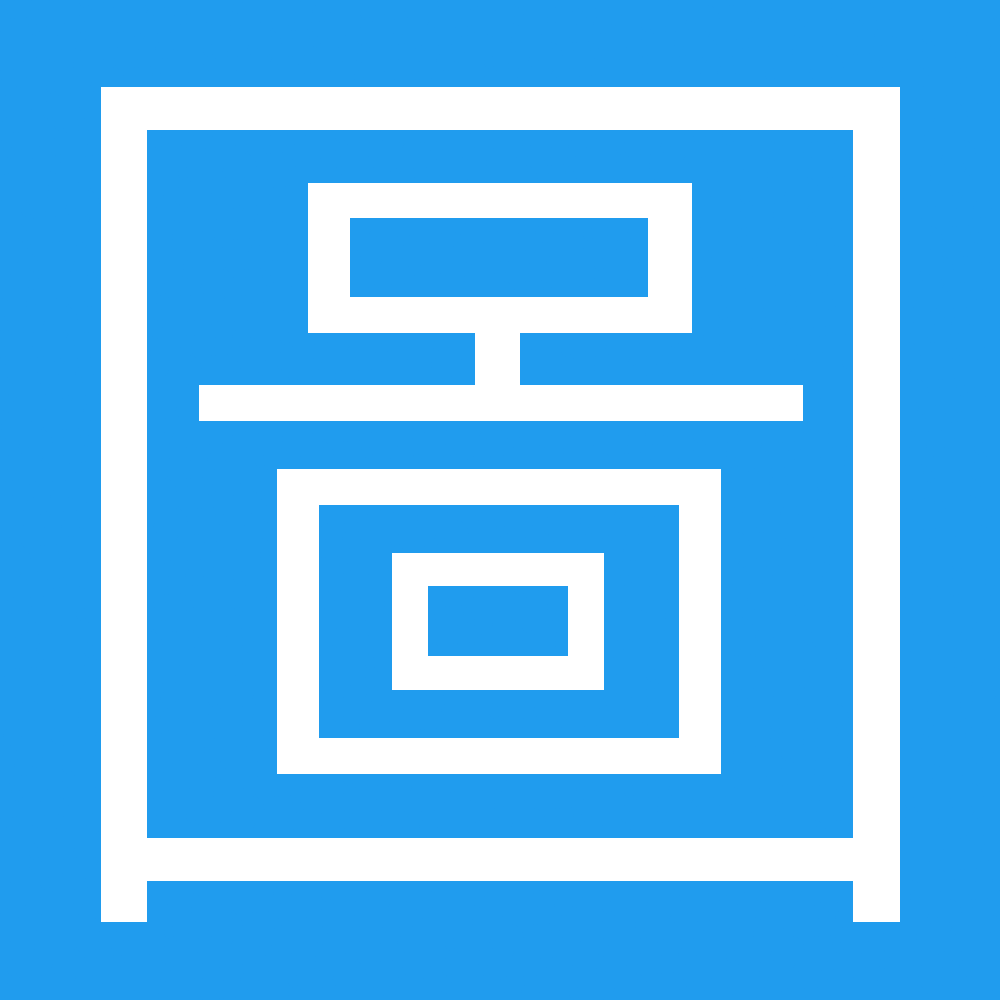
<style>
.page{position:relative;width:1000px;height:1000px;background:#209cee}
.page>*{position:absolute;margin:0}
.t1{font:970.8px "SourceHanSansHC-Light";color:#ffffff}
</style>
<div class="page">
<p class="t1" style="left:101px;top:87px;width:799px;height:835px">圖</p>
</div>
